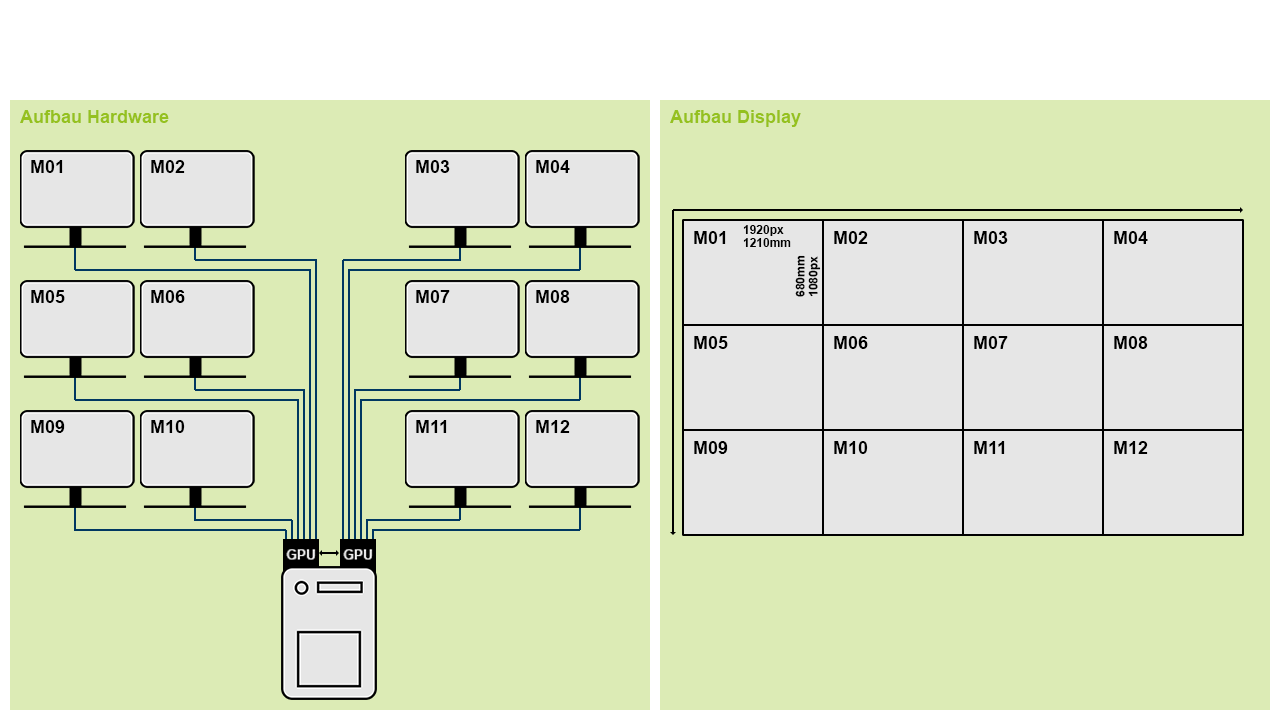
<style>
.page{position:relative;width:1280px;height:720px;background:#dcebb5}
.page>*{position:absolute;margin:0}
.t1{font:18px "Arial-BoldMT";color:#95c11f}
.t2{font:18px "Arial-BoldMT";color:#000000}
.t3{font:12px "Arial-BoldMT";color:#000000}
.t4{font:12.2px "Arial-BoldMT";color:#000000}
</style>
<div class="page">
<p class="t1" style="left:20px;top:110px;width:149px;height:13px">Aufbau Hardware</p>
<p class="t1" style="left:670px;top:110px;width:131px;height:17px">Aufbau Display</p>
<p class="t2" style="left:31px;top:160px;width:32px;height:13px">M01</p>
<p class="t2" style="left:151px;top:160px;width:34px;height:13px">M02</p>
<p class="t2" style="left:416px;top:160px;width:34px;height:13px">M03</p>
<p class="t2" style="left:536px;top:160px;width:34px;height:13px">M04</p>
<p class="t2" style="left:694px;top:231px;width:32px;height:13px">M01</p>
<p class="t3" style="left:743px;top:225px;width:41px;height:11px">1920px</p>
<p class="t2" style="left:834px;top:231px;width:34px;height:13px">M02</p>
<p class="t2" style="left:974px;top:231px;width:34px;height:13px">M03</p>
<p class="t2" style="left:1114px;top:231px;width:34px;height:13px">M04</p>
<p class="t3" style="left:743px;top:238px;width:48px;height:9px">1210mm</p>
<p class="t4" style="left:795px;top:255px;width:10px;height:42px;rotate:-90deg">680mm</p>
<p class="t4" style="left:808px;top:256px;width:13px;height:41px;rotate:-90deg">1080px</p>
<p class="t2" style="left:31px;top:290px;width:34px;height:13px">M05</p>
<p class="t2" style="left:151px;top:290px;width:34px;height:13px">M06</p>
<p class="t2" style="left:416px;top:290px;width:34px;height:13px">M07</p>
<p class="t2" style="left:536px;top:290px;width:34px;height:13px">M08</p>
<p class="t2" style="left:694px;top:336px;width:34px;height:13px">M05</p>
<p class="t2" style="left:834px;top:336px;width:34px;height:13px">M06</p>
<p class="t2" style="left:974px;top:336px;width:34px;height:13px">M07</p>
<p class="t2" style="left:1114px;top:336px;width:34px;height:13px">M08</p>
<p class="t2" style="left:31px;top:420px;width:34px;height:13px">M09</p>
<p class="t2" style="left:151px;top:420px;width:34px;height:13px">M10</p>
<p class="t2" style="left:416px;top:420px;width:31px;height:13px">M11</p>
<p class="t2" style="left:536px;top:420px;width:34px;height:13px">M12</p>
<p class="t2" style="left:694px;top:441px;width:34px;height:13px">M09</p>
<p class="t2" style="left:834px;top:441px;width:34px;height:13px">M10</p>
<p class="t2" style="left:974px;top:441px;width:31px;height:13px">M11</p>
<p class="t2" style="left:1114px;top:441px;width:34px;height:13px">M12</p>
</div>
